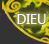
<style>
.page{position:relative;width:49px;height:44px;background:#333333}
.page>*{position:absolute;margin:0}
.t1{font:14px "LaoUI";color:#ffffff}
</style>
<div class="page">
<p class="t1" style="left:17px;top:14px;width:29px;height:10px">DIEU</p>
</div>
